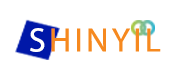
<style>
.page{position:relative;width:180px;height:80px;background:#ffffff}
.page>*{position:absolute;margin:0}
.t1{font:34px "MyriadPro-Regular";letter-spacing:0.1em;color:#f6891f}
.t2{font:34px "MyriadPro-Regular";letter-spacing:0.1em;color:#ffffff}
</style>
<div class="page">
<p class="t1" style="left:30px;top:28px;width:131px;height:24px"><span class="t2">S</span>HINYIL</p>
</div>
